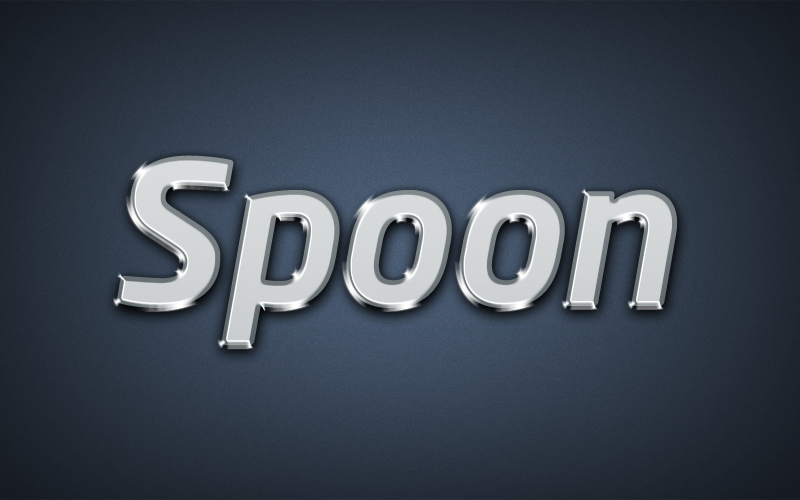
<style>
.page{position:relative;width:800px;height:500px}
.page>*{position:absolute;margin:0}
.t1{font:200px "NeoSans-BoldItalic";letter-spacing:-0.025em;color:#c7c7c7}
.t2{font:200px "NeoSans-BoldItalic";letter-spacing:-0.04em;color:#c7c7c7}
</style>
<div class="page">
<p class="t1" style="left:117px;top:155px;width:561px;height:191px">Spo<span class="t2">on</span></p>
</div>
